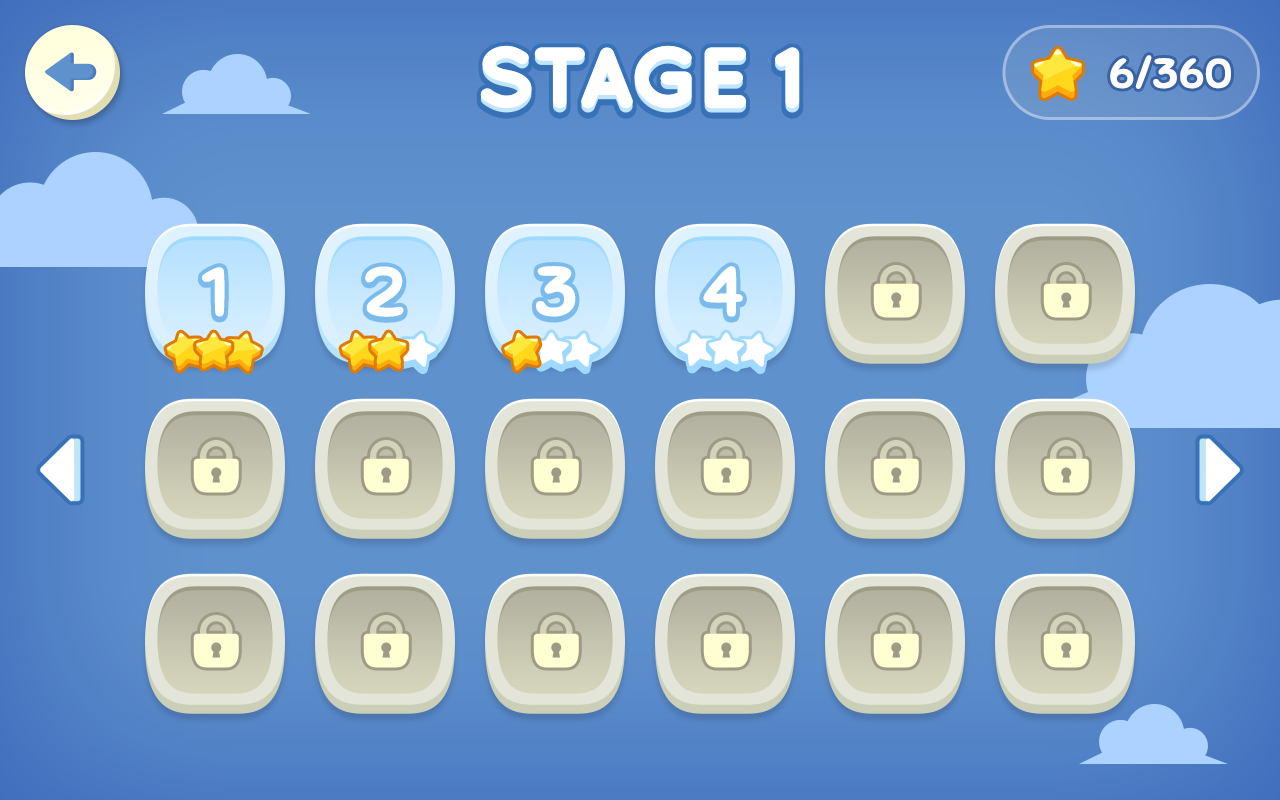
<style>
.page{position:relative;width:1280px;height:800px}
.page>*{position:absolute;margin:0}
.t1{font:40.5px "Sniglet-Regular";color:#ffffff;text-transform:uppercase;font-weight:bold;scale:1.11 1}
.t2{font:67.5px "Sniglet-Regular";letter-spacing:-0.075em;color:#ffffff;text-transform:uppercase;font-weight:bold;scale:1.12 1}
</style>
<div class="page">
<p class="t1" style="left:1110px;top:55px;width:121px;height:34px">6/360</p>
<p class="t2" style="left:202px;top:269px;width:23px;height:50px">1</p>
<p class="t2" style="left:202px;top:267px;width:23px;height:50px">1</p>
<p class="t2" style="left:365px;top:268px;width:39px;height:51px">2</p>
<p class="t2" style="left:365px;top:266px;width:39px;height:51px">2</p>
<p class="t2" style="left:536px;top:268px;width:40px;height:51px">3</p>
<p class="t2" style="left:536px;top:266px;width:40px;height:51px">3</p>
<p class="t2" style="left:703px;top:268px;width:40px;height:51px">4</p>
<p class="t2" style="left:703px;top:266px;width:40px;height:51px">4</p>
</div>
